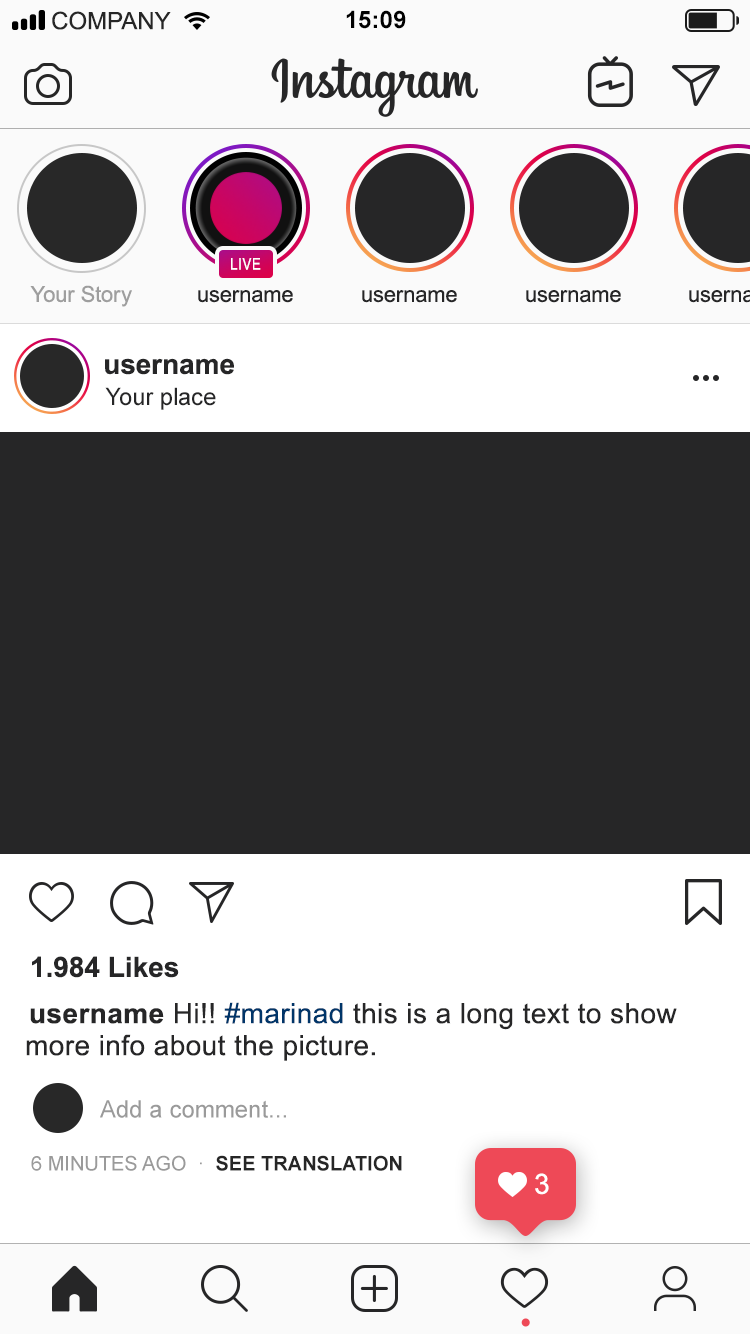
<style>
.page{position:relative;width:750px;height:1334px;background:#262627}
.page>*{position:absolute;margin:0}
.t1{font:24px "ArialMT";color:#262626}
.t2{font:24px "Arial-BoldMT";color:#000000}
.t3{font:16px "ArialNarrow";letter-spacing:0.042em;color:#ffffff}
.t4{font:22px "ArialMT";color:#9e9e9e}
.t5{font:22px "ArialMT";color:#262627}
.t6{font:28px "Arial-BoldMT";color:#262627}
.t7{font:24px "ArialMT";color:#262627}
.t8{font:28px/32px "ArialMT";letter-spacing:0.015em;color:#262627}
.t9{font:28px/32px "Arial-BoldMT";letter-spacing:0.015em;color:#262627}
.t10{font:28px/32px "ArialMT";letter-spacing:0.015em;color:#003569}
.t11{font:24px "ArialMT";color:#9a9a9a}
.t12{font:20px "ArialMT";color:#9a9a9a}
.t13{font:20px "Arial-BoldMT";color:#262626}
.t14{font:28px "ArialMT";color:#ffffff}
</style>
<div class="page">
<p class="t1" style="left:52px;top:11px;width:119px;height:19px">COMPANY</p>
<p class="t2" style="left:346px;top:10px;width:60px;height:19px">15:09</p>
<p class="t3" style="left:231px;top:258px;width:30px;height:12px">LIVE</p>
<p class="t4" style="left:30px;top:285px;width:102px;height:22px">Your Story</p>
<p class="t5" style="left:198px;top:290px;width:95px;height:13px">username</p>
<p class="t5" style="left:362px;top:290px;width:95px;height:13px">username</p>
<p class="t5" style="left:526px;top:290px;width:95px;height:13px">username</p>
<p class="t6" style="left:105px;top:358px;width:129px;height:17px">username</p>
<p class="t7" style="left:105px;top:387px;width:111px;height:23px">Your place</p>
<p class="t6" style="left:32px;top:956px;width:147px;height:22px">1.984 Likes</p>
<p class="t8" style="left:26px;top:1002px;width:651px;height:59px"><span class="t9">username</span> Hi!! <span class="t10">#marinad </span>this is a long text to show more info about the picture.</p>
<p class="t11" style="left:100px;top:1100px;width:186px;height:18px">Add a comment...</p>
<p class="t12" style="left:31px;top:1155px;width:371px;height:16px">6 MINUTES AGO  ·  <span class="t13">SEE TRANSLATION</span></p>
<p class="t14" style="left:535px;top:1173px;width:14px;height:22px">3</p>
</div>
